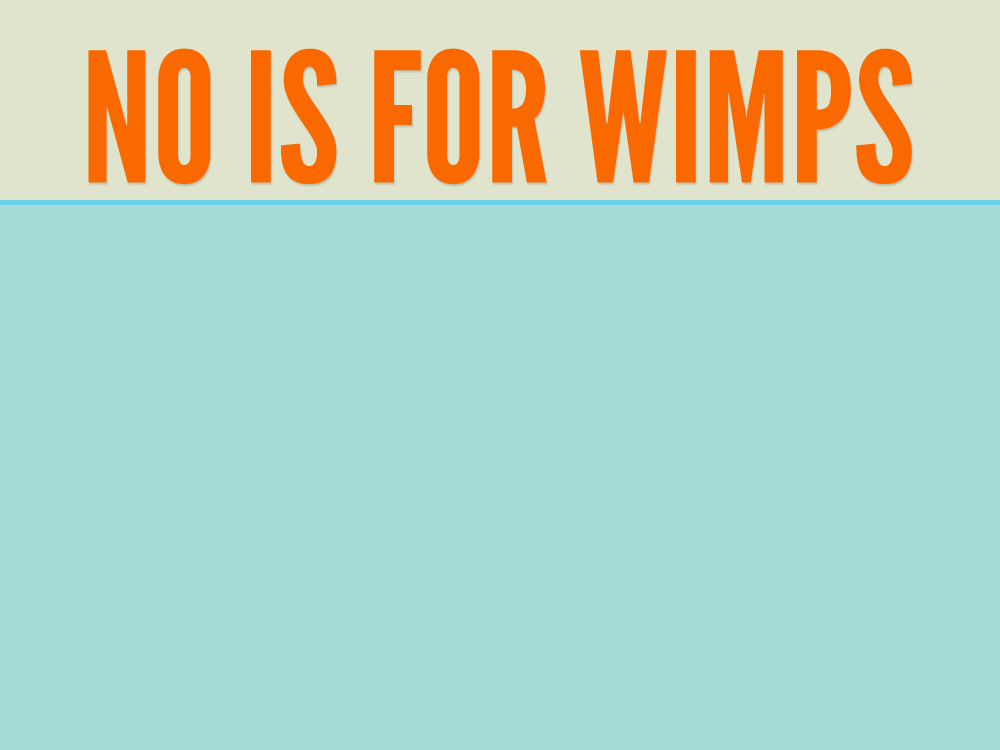
<style>
.page{position:relative;width:1000px;height:750px;background:#a7dbd8}
.page>*{position:absolute;margin:0}
.t1{font:180px "LeagueGothic";color:#fa6900}
</style>
<div class="page">
<p class="t1" style="left:88px;top:48px;width:824px;height:137px">NO IS FOR WIMPS</p>
</div>
